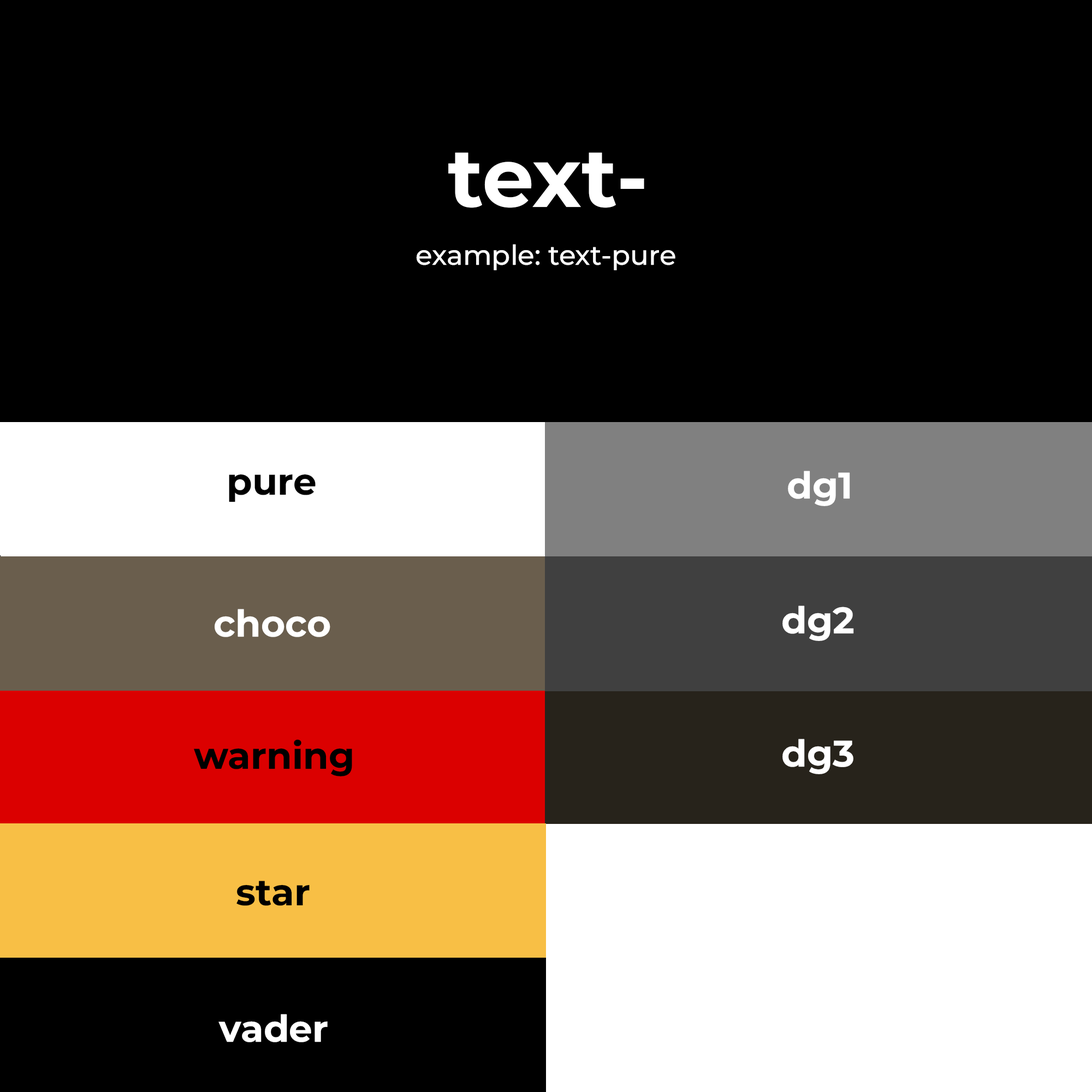
<style>
.page{position:relative;width:1092px;height:1092px;background:#000000}
.page>*{position:absolute;margin:0}
.t1{font:82.6px "MontserratRoman-Bold";color:#ffffff}
.t2{font:27.4px "MontserratRoman-Medium";color:#ffffff}
.t3{font:36.9px "MontserratRoman-Bold";color:#000000}
.t4{font:36.9px "MontserratRoman-Bold";color:#ffffff}
</style>
<div class="page">
<p class="t1" style="left:448px;top:152px;width:196px;height:56px">text-</p>
<p class="t2" style="left:416px;top:244px;width:259px;height:26px">example: text-pure</p>
<p class="t3" style="left:229px;top:474px;width:87px;height:28px">pure</p>
<p class="t4" style="left:788px;top:471px;width:62px;height:35px">dg1</p>
<p class="t4" style="left:782px;top:606px;width:72px;height:35px">dg2</p>
<p class="t4" style="left:215px;top:609px;width:115px;height:28px">choco</p>
<p class="t3" style="left:194px;top:739px;width:158px;height:37px">warning</p>
<p class="t4" style="left:782px;top:739px;width:71px;height:35px">dg3</p>
<p class="t3" style="left:236px;top:881px;width:74px;height:25px">star</p>
<p class="t4" style="left:218px;top:1014px;width:110px;height:28px">vader</p>
</div>
